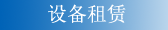
<style>
.page{position:relative;width:168px;height:30px}
.page>*{position:absolute;margin:0}
.t1{font:20px "SimSun";color:#ffffff}
</style>
<div class="page">
<p class="t1" style="left:48px;top:4px;width:78px;height:20px">设备租赁</p>
</div>
